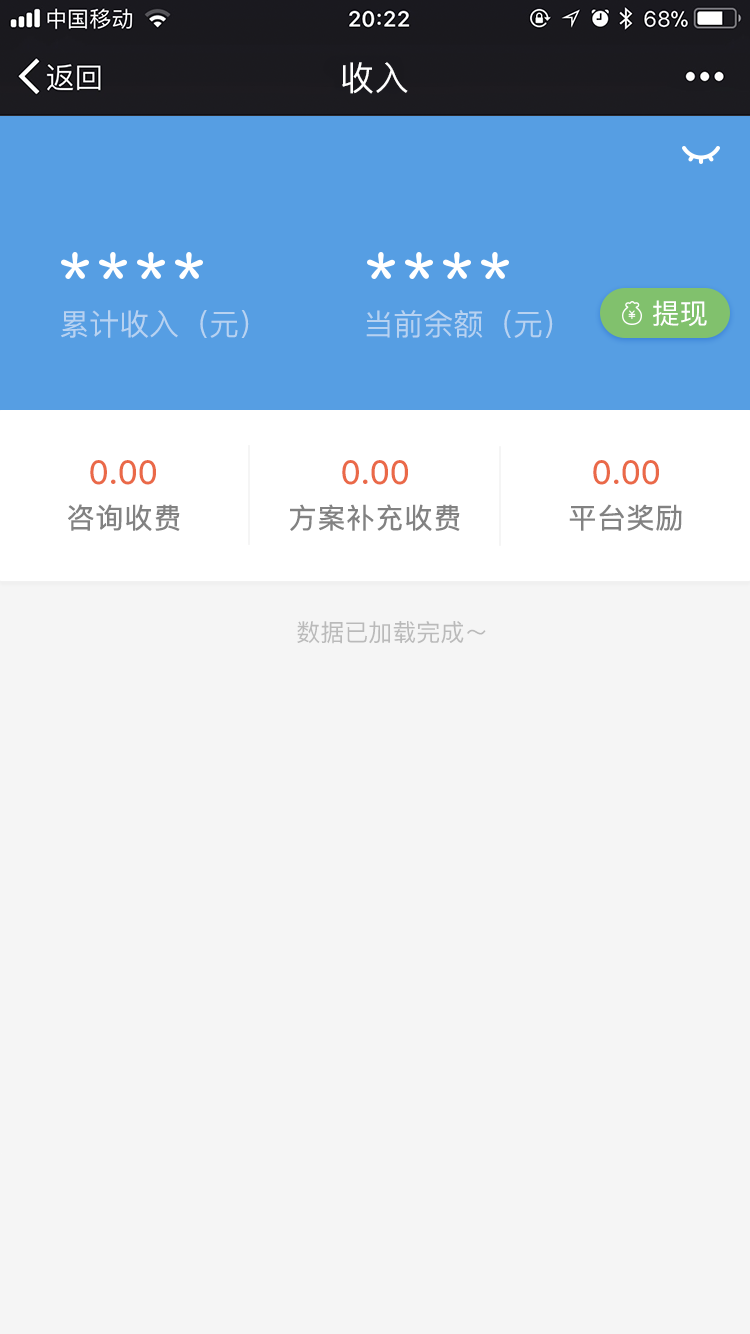
<style>
.page{position:relative;width:750px;height:1334px;background:#f5f5f5}
.page>*{position:absolute;margin:0}
.t1{font:34px "PingFangSC-Regular";letter-spacing:0.02em;color:#ffffff}
.t2{font:28px "PingFangSC-Regular";color:#ffffff}
.t3{font:30px "PingFangSC-Regular";color:#b7d2f1}
.t4{font:32px "PingFangSC-Regular";color:#ea6948;font-weight:bold}
.t5{font:28px "PingFangSC-Regular";color:#828282;font-weight:bold}
.t6{font:24px "PingFangSC-Regular";color:#bababa}
</style>
<div class="page">
<p class="t1" style="left:342px;top:62px;width:66px;height:32px">收入</p>
<p class="t2" style="left:653px;top:300px;width:54px;height:27px">提现</p>
<p class="t3" style="left:61px;top:310px;width:188px;height:28px">累计收入（元）</p>
<p class="t3" style="left:366px;top:310px;width:187px;height:28px">当前余额（元）</p>
<p class="t4" style="left:90px;top:460px;width:66px;height:25px">0.00</p>
<p class="t4" style="left:342px;top:460px;width:66px;height:25px">0.00</p>
<p class="t4" style="left:593px;top:460px;width:66px;height:25px">0.00</p>
<p class="t5" style="left:68px;top:504px;width:112px;height:27px">咨询收费</p>
<p class="t5" style="left:290px;top:504px;width:170px;height:27px">方案补充收费</p>
<p class="t5" style="left:569px;top:504px;width:113px;height:27px">平台奖励</p>
<p class="t6" style="left:297px;top:621px;width:189px;height:23px">数据已加载完成～</p>
</div>
